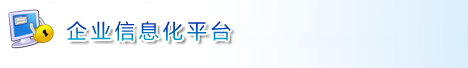
<style>
.page{position:relative;width:468px;height:68px;background:#ffffff}
.page>*{position:absolute;margin:0}
.t1{font:20px "MicrosoftYaHei";letter-spacing:0.2em}
</style>
<div class="page">
<p class="t1" style="left:66px;top:21px;width:165px;height:20px">企业信息化平台</p>
</div>
